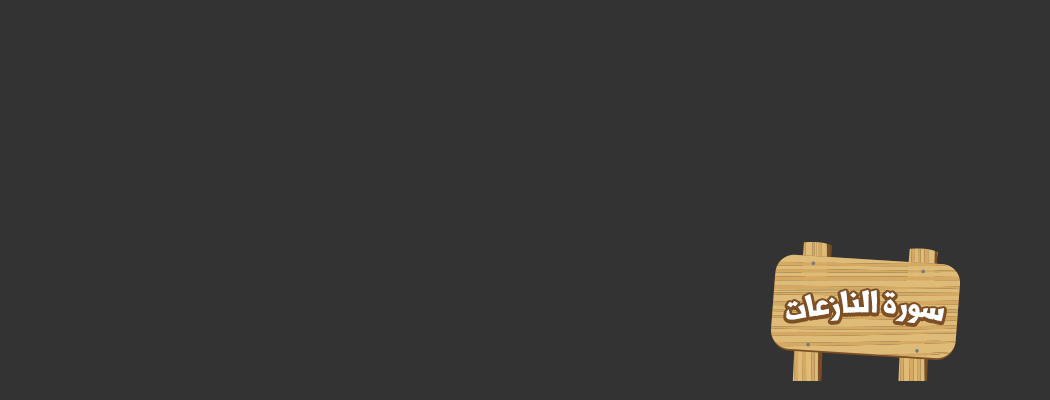
<style>
.page{position:relative;width:1050px;height:400px;background:#333333}
.page>*{position:absolute;margin:0}
.t1{font:36px "Shorooq_N1";color:#ffffff}
</style>
<div class="page">
<p class="t1" style="left:786px;top:290px;width:158px;height:33px">سورة النازعات</p>
</div>
